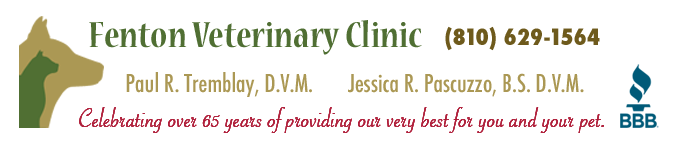
<style>
.page{position:relative;width:679px;height:157px;background:#ffffff}
.page>*{position:absolute;margin:0}
.t1{font:40px "NuevaStd-BoldCond";color:#506f33}
.t2{font:22px "Futura-CondensedExtraBold";color:#6e5a1c}
.t3{font:24px "Futura-CondensedMedium";color:#ab9854}
.t4{font:29.4px "SavoyeLetPlain";letter-spacing:0.01em;color:#ab122f;scale:0.95 1}
</style>
<div class="page">
<p class="t1" style="left:89px;top:20px;width:333px;height:35px">Fenton Veterinary Clinic</p>
<p class="t2" style="left:445px;top:26px;width:155px;height:25px">(810) 629-1564</p>
<p class="t3" style="left:126px;top:72px;width:458px;height:25px">Paul R. Tremblay, D.V.M.       Jessica R. Pascuzzo, B.S. D.V.M.</p>
<p class="t4" style="left:79px;top:107px;width:525px;height:26px">Celebrating over 65 years of providing our very best for you and your pet.</p>
</div>
